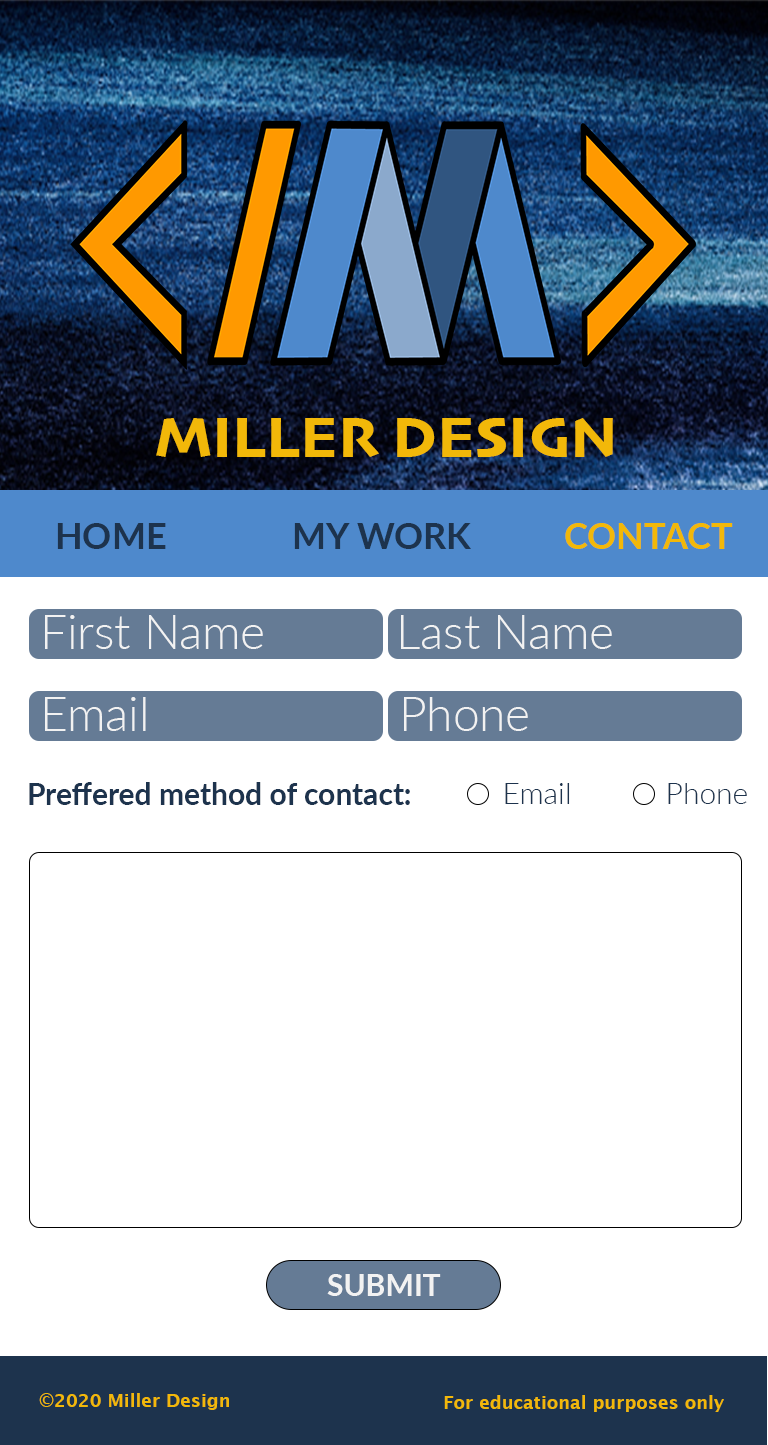
<style>
.page{position:relative;width:768px;height:1445px;background:#ffffff}
.page>*{position:absolute;margin:0}
.t1{font:60px "Skia-Bold";color:#f2b809}
.t2{font:36px "Lato-Bold";color:#1d334d}
.t3{font:36px "Lato-Bold";color:#f2b809}
.t4{font:47.6px "Lato-Light";color:#f2f2f2}
.t5{font:30px "Lato-Bold";color:#1d334d}
.t6{font:30px "Lato-Light";color:#1d334d}
.t7{font:30px "Lato-Bold";color:#f2f2f2}
.t8{font:18px "LucidaGrande-Bold";color:#f2b809}
</style>
<div class="page">
<p class="t1" style="left:156px;top:418px;width:457px;height:39px">MILLER DESIGN</p>
<p class="t2" style="left:57px;top:523px;width:109px;height:26px">HOME</p>
<p class="t2" style="left:294px;top:523px;width:177px;height:26px">MY WORK</p>
<p class="t3" style="left:565px;top:523px;width:168px;height:26px">CONTACT</p>
<p class="t4" style="left:45px;top:615px;width:218px;height:34px">First Name</p>
<p class="t4" style="left:401px;top:615px;width:211px;height:34px">Last Name</p>
<p class="t4" style="left:45px;top:697px;width:101px;height:34px">Email</p>
<p class="t4" style="left:404px;top:697px;width:124px;height:34px">Phone</p>
<p class="t5" style="left:29px;top:782px;width:381px;height:23px">Preffered method of contact:</p>
<p class="t6" style="left:505px;top:783px;width:65px;height:21px">Email</p>
<p class="t6" style="left:668px;top:783px;width:79px;height:21px">Phone</p>
<p class="t7" style="left:327px;top:1274px;width:114px;height:22px">SUBMIT</p>
<p class="t8" style="left:39px;top:1393px;width:190px;height:17px">©2020 Miller Design</p>
<p class="t8" style="left:444px;top:1395px;width:280px;height:17px">For educational purposes only</p>
</div>
